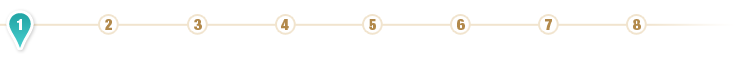
<style>
.page{position:relative;width:740px;height:60px;background:#ffffff}
.page>*{position:absolute;margin:0}
.t1{font:15px "HelveticaNeueLTStd-XBlkCn";color:#ffffff}
.t2{font:15px "HelveticaNeueLTStd-XBlkCn";color:#b2894b}
</style>
<div class="page">
<p class="t1" style="left:17px;top:19px;width:5px;height:11px">1</p>
<p class="t2" style="left:105px;top:19px;width:7px;height:11px">2</p>
<p class="t2" style="left:194px;top:19px;width:8px;height:11px">3</p>
<p class="t2" style="left:281px;top:19px;width:8px;height:11px">4</p>
<p class="t2" style="left:369px;top:19px;width:7px;height:11px">5</p>
<p class="t2" style="left:457px;top:19px;width:8px;height:11px">6</p>
<p class="t2" style="left:545px;top:19px;width:7px;height:11px">7</p>
<p class="t2" style="left:633px;top:19px;width:8px;height:11px">8</p>
</div>
